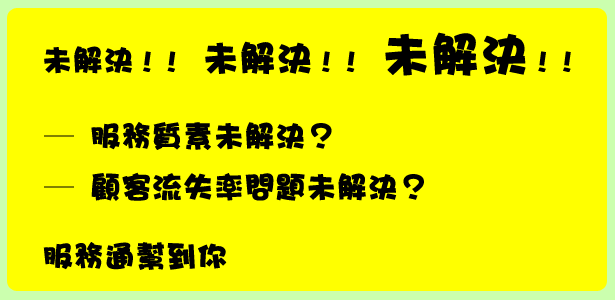
<style>
.page{position:relative;width:615px;height:300px;background:#ffff00}
.page>*{position:absolute;margin:0}
.t1{font:30px "DFHaiBaoW12-UB-HK-BF";color:#000000;font-weight:bold}
.t2{font:24px "DFHaiBaoW12-UB-HK-BF";color:#000000;font-weight:bold}
.t3{font:36px "DFHaiBaoW12-UB-HK-BF";color:#000000;font-weight:bold}
.t4{font:48px "DFHaiBaoW12-UB-HK-BF";color:#000000;font-weight:bold}
</style>
<div class="page">
<p class="t1" style="left:44px;top:32px;width:527px;height:44px">未解決<span class="t2">！！</span><span class="t3"> 未解決</span><span class="t2">！！ </span><span class="t4">未解決</span><span class="t2">！！</span></p>
<p class="t1" style="left:44px;top:122px;width:288px;height:28px">─ 服務質素未解決？</p>
<p class="t1" style="left:44px;top:172px;width:380px;height:29px">─ 顧客流失率問題未解決？</p>
<p class="t1" style="left:43px;top:242px;width:184px;height:28px">服務通幫到你</p>
</div>
